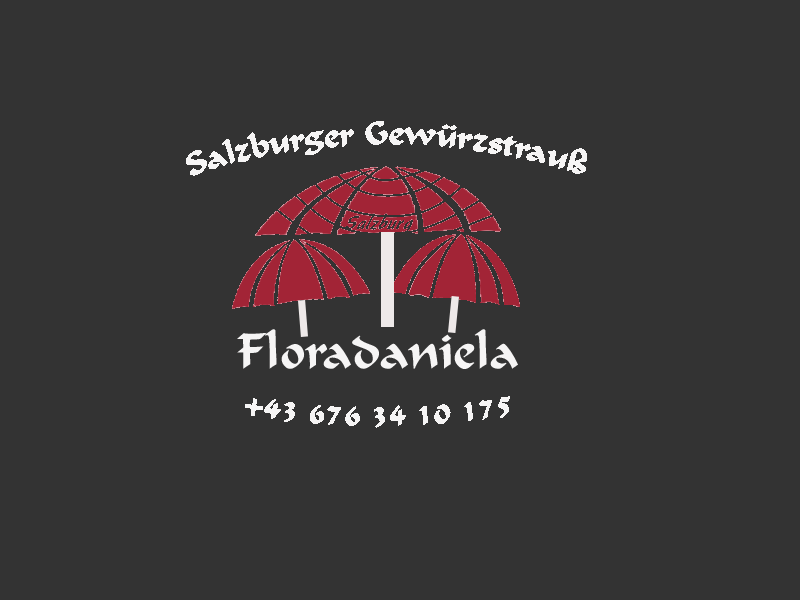
<style>
.page{position:relative;width:800px;height:600px;background:#333333}
.page>*{position:absolute;margin:0}
.t1{font:32px "OPTIOndineFive";color:#f6f5f5}
.t2{font:50.7px "OPTIOndineFive";color:#f6f5f5}
</style>
<div class="page">
<p class="t1" style="left:186px;top:121px;width:401px;height:55px">Salzburger Gewürzstrauß</p>
<p class="t2" style="left:237px;top:329px;width:281px;height:40px">Floradaniela</p>
<p class="t1" style="left:245px;top:396px;width:265px;height:32px">+43 676 34 10 175</p>
</div>
